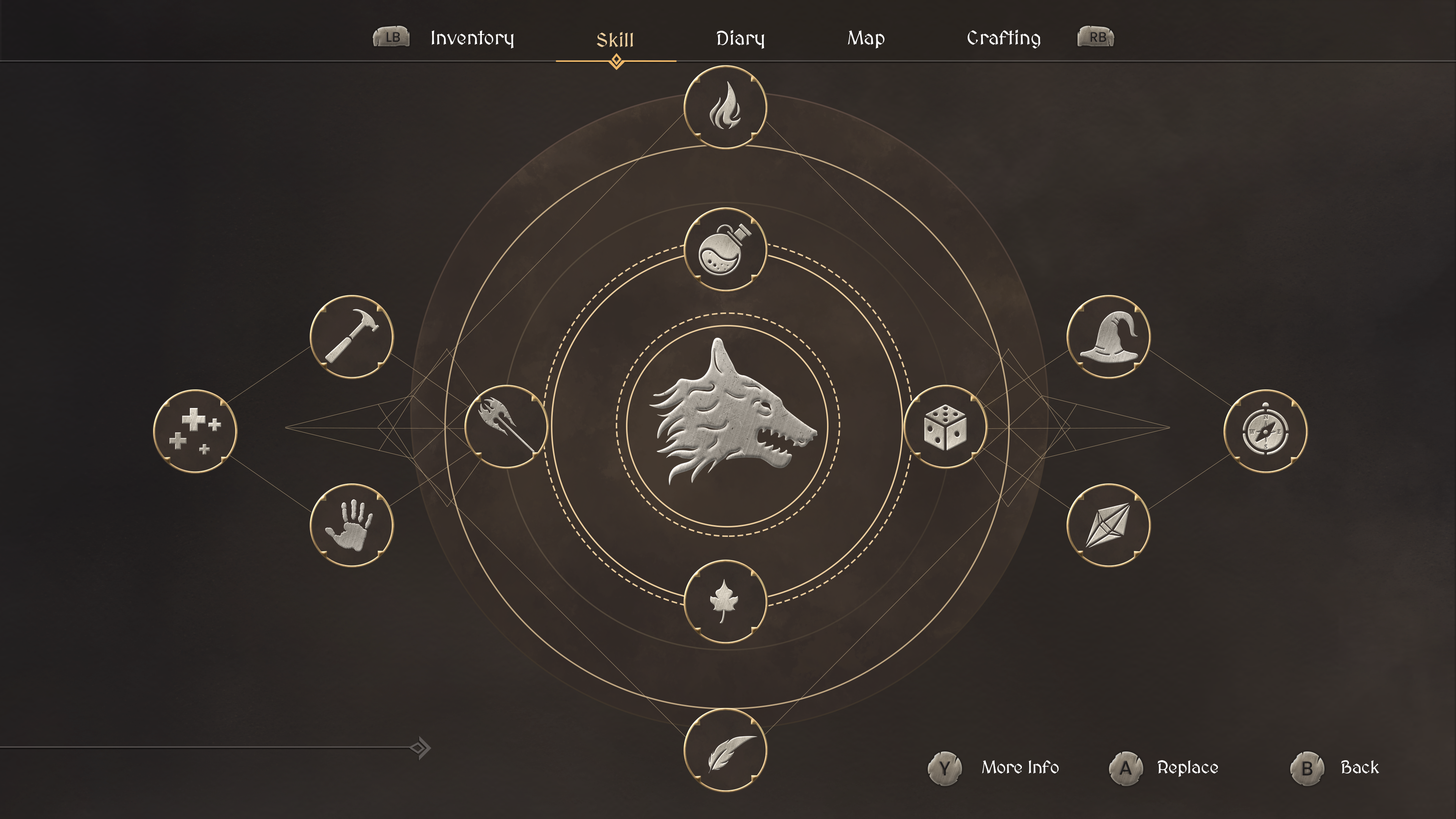
<style>
.page{position:relative;width:1456px;height:819px}
.page>*{position:absolute;margin:0}
.t1{font:19.8px "MedievalSharp";color:#ffffff}
.t2{font:19.8px "MedievalSharp";color:#ecce9f}
.t3{font:18.2px "MedievalSharp";letter-spacing:-0.02em;color:#ffffff}
</style>
<div class="page">
<p class="t1" style="left:717px;top:30px;width:47px;height:19px">Diary</p>
<p class="t1" style="left:968px;top:30px;width:72px;height:19px">Crafting</p>
<p class="t1" style="left:431px;top:30px;width:83px;height:19px">Inventory</p>
<p class="t2" style="left:597px;top:32px;width:36px;height:15px">Skill</p>
<p class="t1" style="left:848px;top:30px;width:37px;height:19px">Map</p>
<p class="t3" style="left:982px;top:760px;width:77px;height:13px">More Info</p>
<p class="t3" style="left:1158px;top:760px;width:60px;height:17px">Replace</p>
<p class="t3" style="left:1341px;top:760px;width:38px;height:13px">Back</p>
</div>
